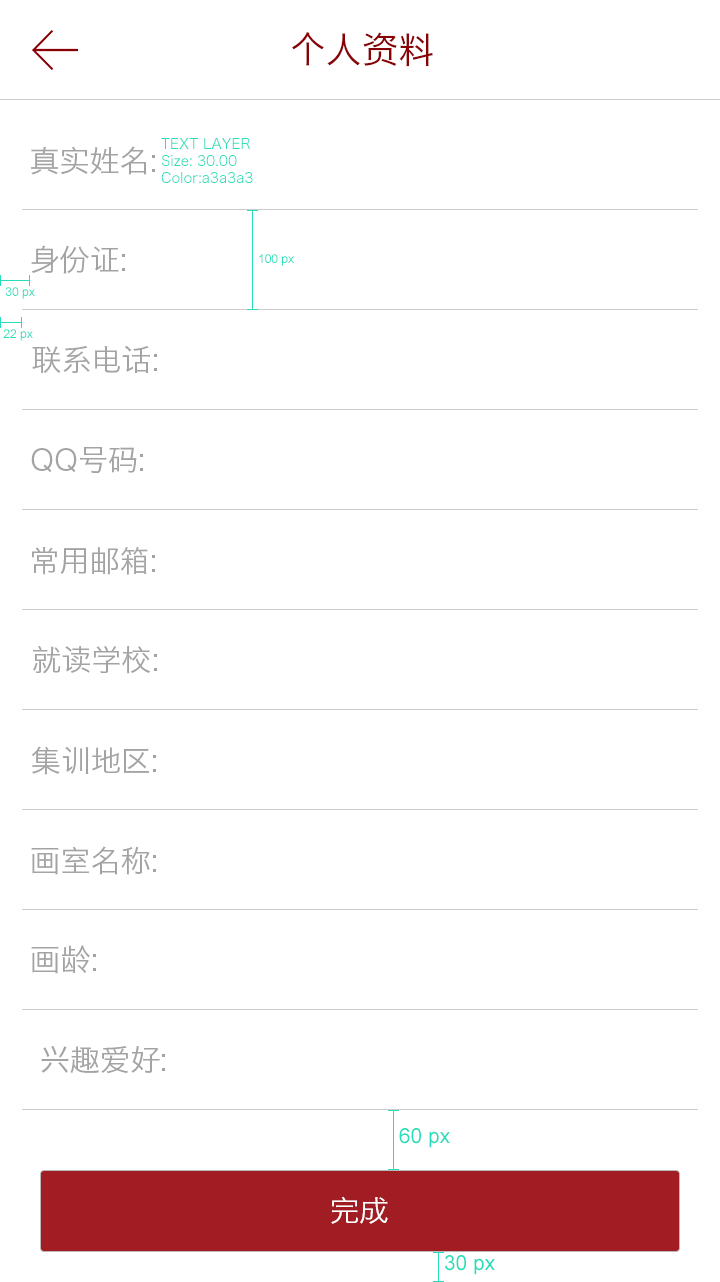
<style>
.page{position:relative;width:720px;height:1282px;background:#ffffff}
.page>*{position:absolute;margin:0}
.t1{font:36px "HiraginoSansGB-W3";color:#8a0105}
.t2{font:30px "HiraginoSansGB-W3";color:#a3a3a3}
.t3{font:14px "HiraginoSansGB-W3";color:#28ddb9}
.t4{font:12px "ArialMT";color:#28ddb9}
.t5{font:20.8px "ArialMT";color:#28ddb9}
.t6{font:30px "HiraginoSansGB-W3";color:#ffffff}
</style>
<div class="page">
<p class="t1" style="left:292px;top:32px;width:141px;height:35px">个人资料</p>
<p class="t2" style="left:31px;top:146px;width:124px;height:29px">真实姓名:</p>
<p class="t3" style="left:161px;top:138px;width:92px;height:45px">TEXT LAYER<br>Size: 30.00<br>Color:a3a3a3</p>
<p class="t2" style="left:31px;top:245px;width:94px;height:29px">身份证:</p>
<p class="t4" style="left:259px;top:254px;width:35px;height:12px">100 px</p>
<p class="t4" style="left:5px;top:287px;width:30px;height:12px">30 px</p>
<p class="t4" style="left:3px;top:329px;width:30px;height:12px">22 px</p>
<p class="t2" style="left:32px;top:345px;width:125px;height:29px">联系电话:</p>
<p class="t2" style="left:31px;top:446px;width:112px;height:27px">QQ号码:</p>
<p class="t2" style="left:32px;top:546px;width:123px;height:29px">常用邮箱:</p>
<p class="t2" style="left:33px;top:645px;width:124px;height:29px">就读学校:</p>
<p class="t2" style="left:31px;top:746px;width:125px;height:29px">集训地区:</p>
<p class="t2" style="left:31px;top:846px;width:125px;height:29px">画室名称:</p>
<p class="t2" style="left:31px;top:945px;width:65px;height:29px">画龄:</p>
<p class="t2" style="left:41px;top:1045px;width:124px;height:29px">兴趣爱好:</p>
<p class="t5" style="left:399px;top:1128px;width:51px;height:20px">60 px</p>
<p class="t6" style="left:331px;top:1196px;width:57px;height:28px">完成</p>
<p class="t5" style="left:445px;top:1255px;width:50px;height:20px">30 px</p>
</div>
